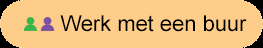
<style>
.page{position:relative;width:263px;height:48px;background:#fecd8a}
.page>*{position:absolute;margin:0}
.t1{font:21.9px "ArialMT";color:#000000}
</style>
<div class="page">
<p class="t1" style="left:60px;top:15px;width:187px;height:17px">Werk met een buur</p>
</div>
